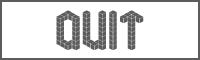
<style>
.page{position:relative;width:200px;height:60px;background:#ffffff}
.page>*{position:absolute;margin:0}
.t1{font:72px "soma";color:#5c5c5c}
</style>
<div class="page">
<p class="t1" style="left:56px;top:10px;width:88px;height:40px">Quit</p>
</div>
